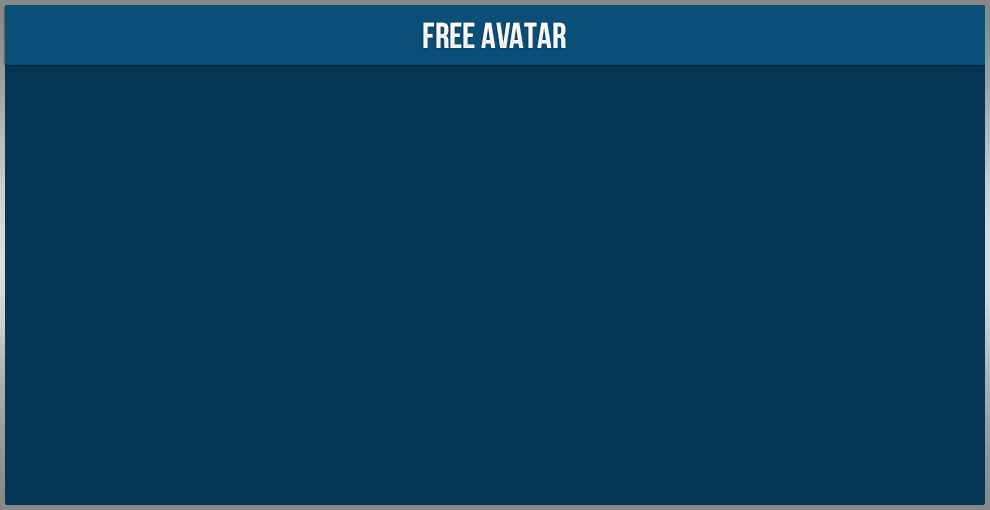
<style>
.page{position:relative;width:990px;height:510px;background:#053754}
.page>*{position:absolute;margin:0}
.t1{font:36px "UTM-Bebas";color:#ffffff}
</style>
<div class="page">
<p class="t1" style="left:423px;top:22px;width:143px;height:26px">free avatar</p>
</div>
